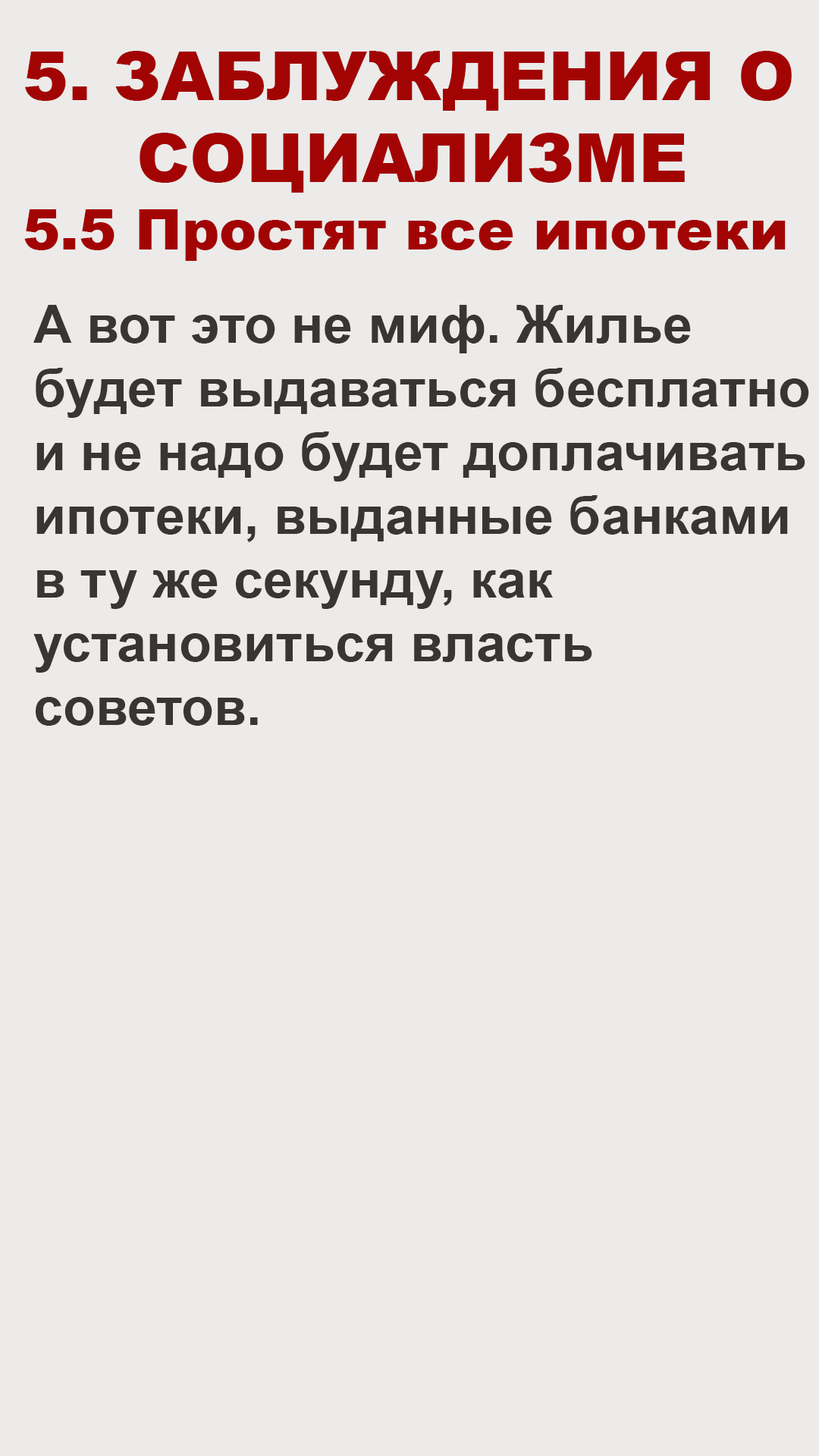
<style>
.page{position:relative;width:819px;height:1456px;background:#ecebe9}
.page>*{position:absolute;margin:0}
.t1{font:68.2px "Arial-Black";color:#a20403}
.t2{font:56.1px "Arial-Black";color:#a20403}
.t3{font:53.1px "Arial-BoldMT";color:#373634}
</style>
<div class="page">
<p class="t1" style="left:24px;top:51px;width:768px;height:210px">5. ЗАБЛУЖДЕНИЯ О <br>     СОЦИАЛИЗМЕ<br><span class="t2">5.5 Простят все ипотеки</span></p>
<p class="t3" style="left:33px;top:305px;width:776px;height:421px">А вот это не миф. Жилье<br>будет выдаваться бесплатно<br>и не надо будет доплачивать<br>ипотеки, выданные банками<br>в ту же секунду, как<br>установиться власть <br>советов.</p>
</div>
